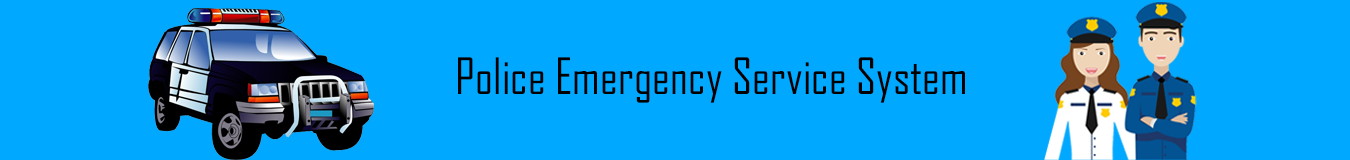
<style>
.page{position:relative;width:1350px;height:160px;background:#00a8ff}
.page>*{position:absolute;margin:0}
.t1{font:48px "AgencyFB-Reg";color:#000000}
</style>
<div class="page">
<p class="t1" style="left:458px;top:57px;width:507px;height:46px">Police Emergency Service System</p>
</div>
